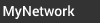
<style>
.page{position:relative;width:100px;height:23px;background:#333333}
.page>*{position:absolute;margin:0}
.t1{font:14px "Roboto-Medium";color:#ffffff}
</style>
<div class="page">
<p class="t1" style="left:3px;top:5px;width:72px;height:14px">MyNetwork</p>
</div>
